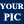
<style>
.page{position:relative;width:24px;height:24px;background:#002355}
.page>*{position:absolute;margin:0}
.t1{font:8px "TimesNewRomanPS-BoldMT";color:#ffffff}
.t2{font:10px "TimesNewRomanPS-BoldMT";color:#ffffff}
</style>
<div class="page">
<p class="t1" style="left:0px;top:3px;width:24px;height:7px">YOUR</p>
<p class="t2" style="left:3px;top:13px;width:18px;height:8px">PIC</p>
</div>
